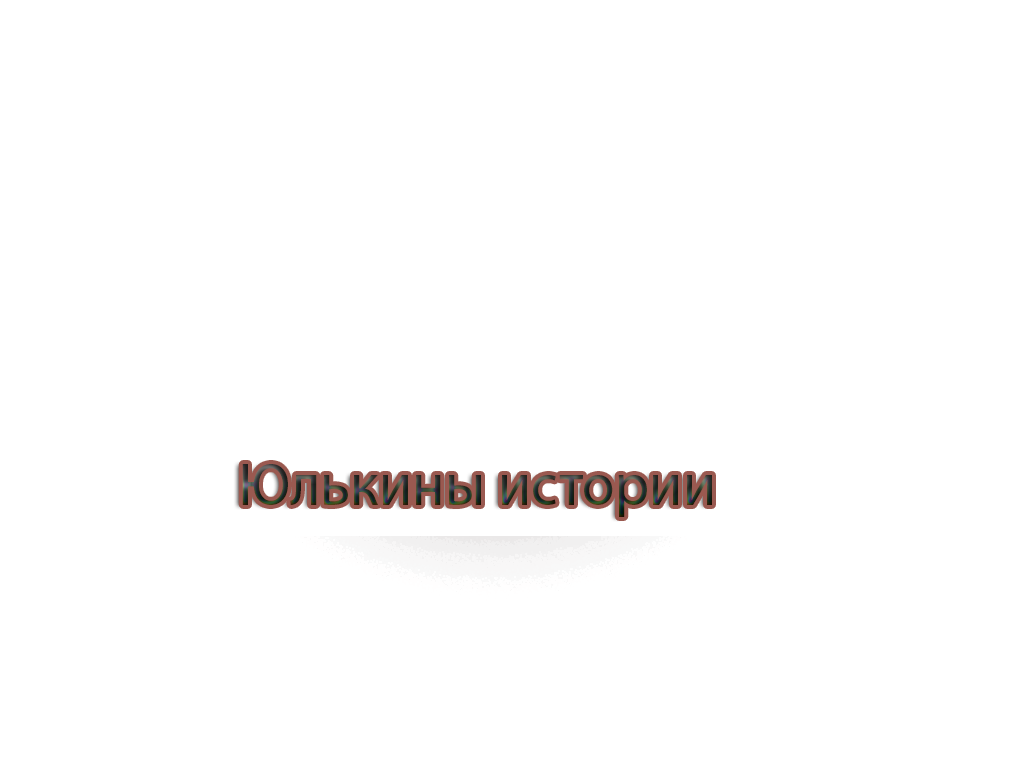
<style>
.page{position:relative;width:1024px;height:768px;background:#ffffff}
.page>*{position:absolute;margin:0}
.t1{font:60px "MyriadPro-Regular"}
</style>
<div class="page">
<p class="t1" style="left:242px;top:464px;width:470px;height:53px">Юлькины истории</p>
</div>
